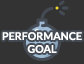
<style>
.page{position:relative;width:84px;height:64px;background:#333333}
.page>*{position:absolute;margin:0}
.t1{font:10.7px "Lato-Bold";color:#ffffff}
</style>
<div class="page">
<p class="t1" style="left:2px;top:32px;width:80px;height:21px;text-align:center">PERFORMANCE<br>GOAL</p>
</div>
